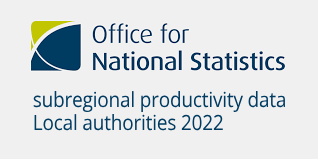
<style>
.page{position:relative;width:318px;height:159px;background:#f0f0f0}
.page>*{position:absolute;margin:0}
.t1{font:20.9px "OpenSans-Regular";letter-spacing:-0.01em;color:#003b61;scale:0.91 1}
</style>
<div class="page">
<p class="t1" style="left:33px;top:91px;width:252px;height:40px">subregional productivity data <br>Local authorities 2022</p>
</div>
